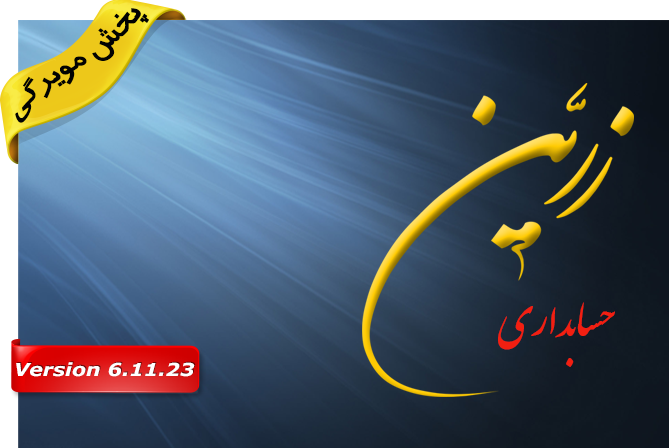
<style>
.page{position:relative;width:669px;height:448px}
.page>*{position:absolute;margin:0}
.t1{font:30.6px "BTrafficBold";color:#020302}
.t2{font:73.6px "IranNastaliq";color:#f21f11}
.t3{font:18.1px "Verdana-BoldItalic";color:#ffffff;scale:1.13 1}
</style>
<div class="page">
<p class="t1" style="left:15px;top:8px;width:134px;height:115px;rotate:-41deg">پخش مویرگی</p>
<p class="t2" style="left:498px;top:302px;width:117px;height:65px">حسابداری</p>
<p class="t3" style="left:16px;top:362px;width:179px;height:15px">Version 6.11.23</p>
</div>
